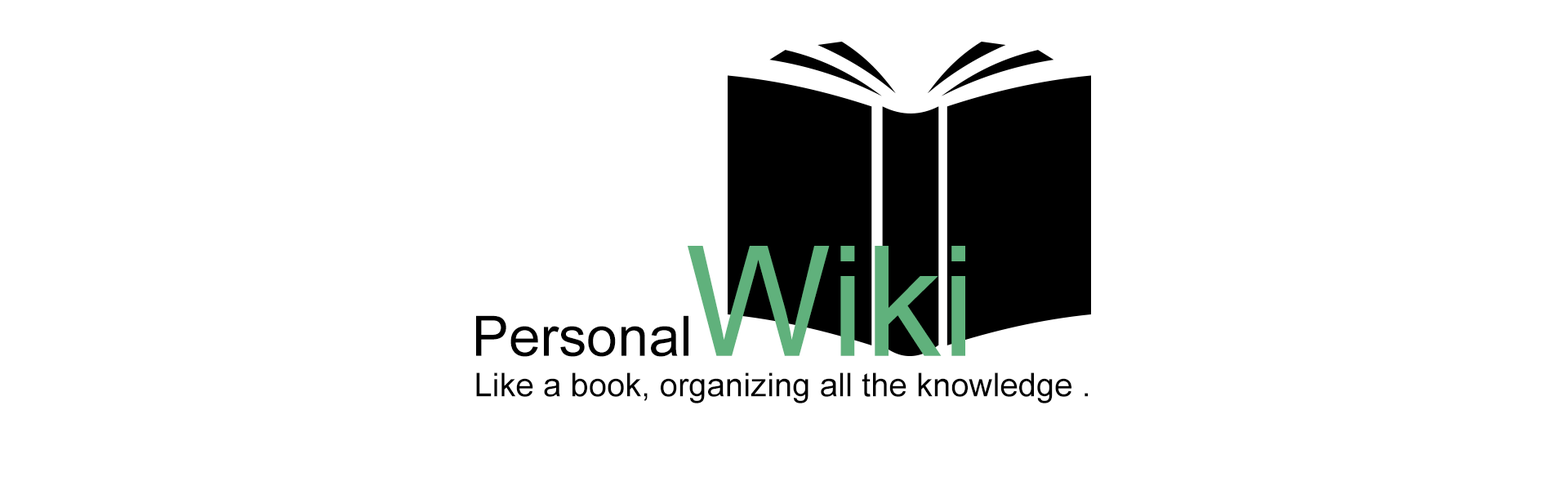
<style>
.page{position:relative;width:1568px;height:490px;background:#ffffff}
.page>*{position:absolute;margin:0}
.t1{font:153.4px "ArialMT";color:#60b17c}
.t2{font:55.8px "ArialMT";color:#000000}
.t3{font:32.7px "ArialMT";color:#000000}
</style>
<div class="page">
<p class="t1" style="left:688px;top:246px;width:277px;height:110px">Wiki</p>
<p class="t2" style="left:476px;top:315px;width:212px;height:42px">Personal</p>
<p class="t3" style="left:476px;top:372px;width:612px;height:31px">Like a book, organizing all the knowledge .</p>
</div>
